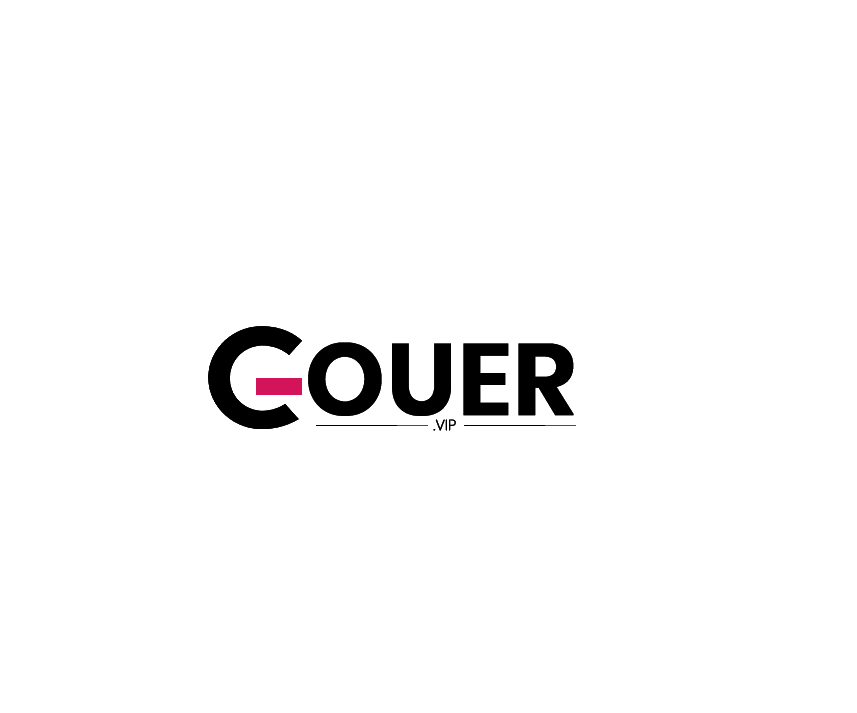
<style>
.page{position:relative;width:857px;height:713px;background:#ffffff}
.page>*{position:absolute;margin:0}
.t1{font:100px "Poppins-SemiBold";color:#000000;font-weight:bold}
.t2{font:14.5px "Poppins-Thin";color:#000000;font-weight:bold}
</style>
<div class="page">
<p class="t1" style="left:308px;top:342px;width:266px;height:74px">OUER</p>
<p class="t2" style="left:433px;top:419px;width:23px;height:12px">.VIP</p>
</div>
